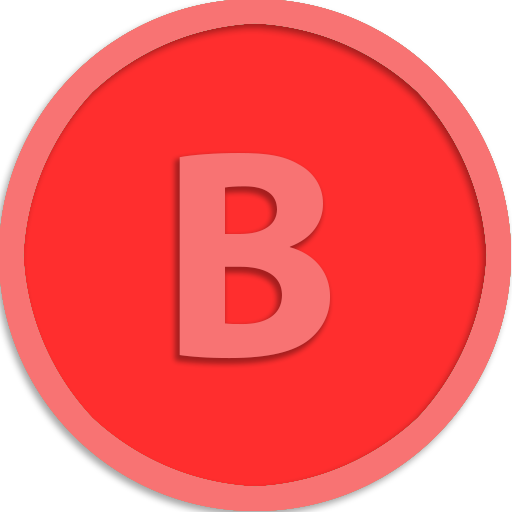
<style>
.page{position:relative;width:512px;height:512px;background:#ff2e2e}
.page>*{position:absolute;margin:0}
.t1{font:300px "MyriadPro-Bold";color:#f87373}
</style>
<div class="page">
<p class="t1" style="left:179px;top:153px;width:151px;height:206px">B</p>
</div>
